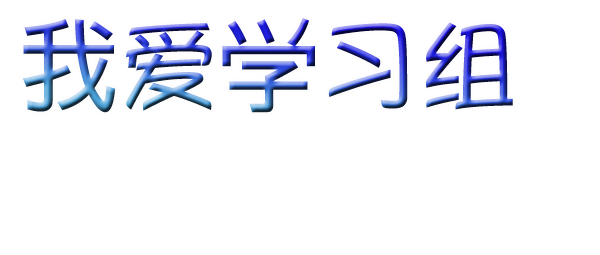
<style>
.page{position:relative;width:600px;height:255px;background:#ffffff}
.page>*{position:absolute;margin:0}
.t1{font:100px "¬ð"}
.t2{font:100px "AdobeFanHeitiStd-Bold"}
</style>
<div class="page">
<p class="t1" style="left:23px;top:18px;width:490px;height:95px"><span class="t2">我</span>爱<span class="t2">学</span>习组</p>
</div>
